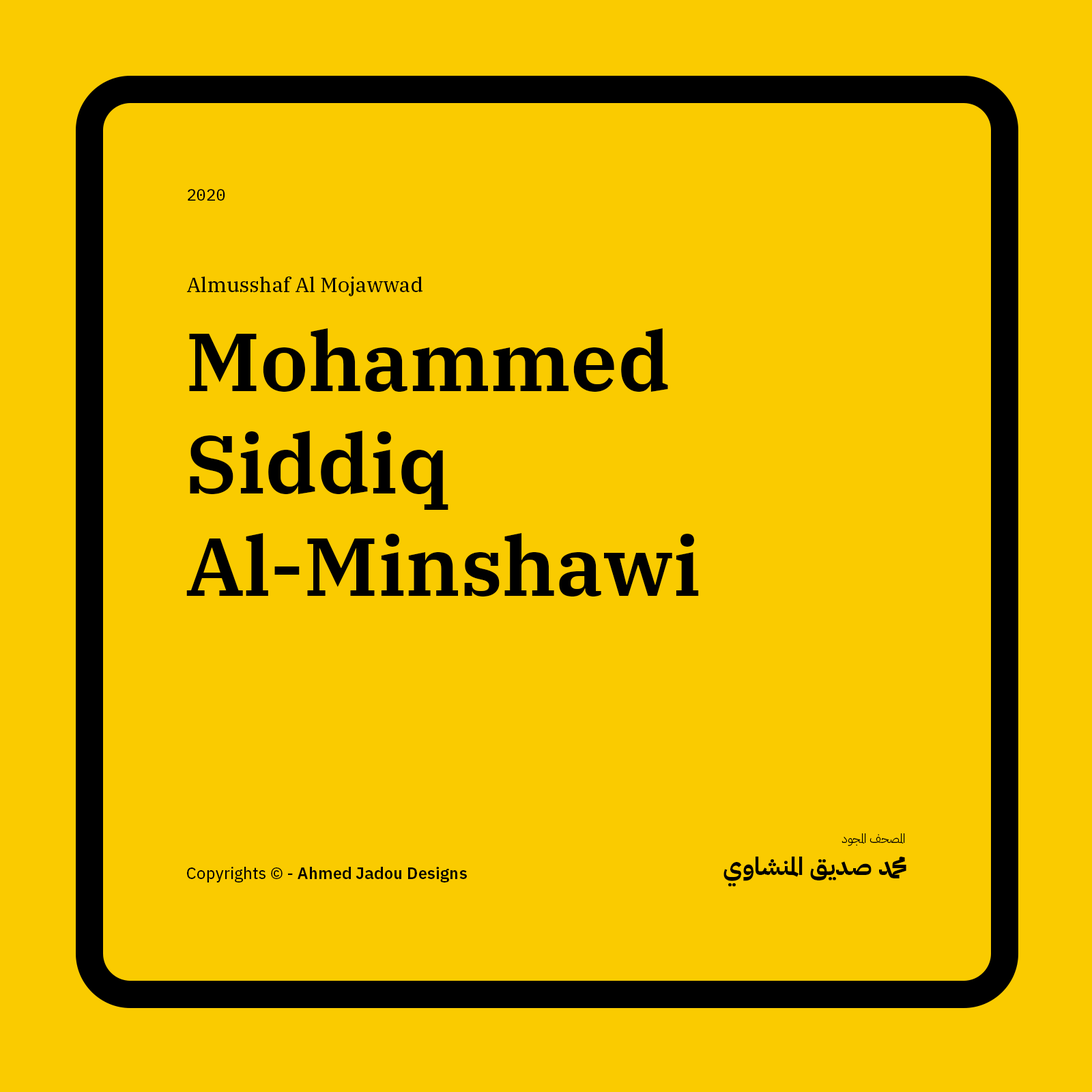
<style>
.page{position:relative;width:1092px;height:1092px;background:#facb00}
.page>*{position:absolute;margin:0}
.t1{font:16.4px "IBMPlexMono-Text";color:#000000}
.t2{font:20.5px "IBMPlexSerif-Text";color:#000000}
.t3{font:81.9px/102.7px "IBMPlexSerif-SemiBold";color:#000000}
.t4{font:12.3px "IBMPlexArabic-Light";color:#000000}
.t5{font:24.6px "IBMPlexArabic-Bold";color:#000000}
.t6{font:16.4px "IBMPlexSans-SemiBold";color:#000000}
.t7{font:16.4px "IBMPlexSans-Text";color:#000000}
</style>
<div class="page">
<p class="t1" style="left:188px;top:189px;width:37px;height:12px">2020</p>
<p class="t2" style="left:187px;top:276px;width:235px;height:20px">Almusshaf Al Mojawwad</p>
<p class="t3" style="left:186px;top:328px;width:513px;height:268px">Mohammed Siddiq Al-Minshawi</p>
<p class="t4" style="left:842px;top:833px;width:63px;height:13px">المصحف المجود</p>
<p class="t5" style="left:723px;top:857px;width:183px;height:30px">محمد صديق المنشاوي</p>
<p class="t6" style="left:187px;top:867px;width:280px;height:15px"><span class="t7">Copyrights © - </span>Ahmed Jadou Designs</p>
</div>
